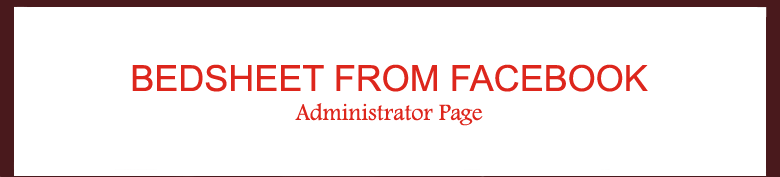
<style>
.page{position:relative;width:780px;height:177px;background:#ffffff}
.page>*{position:absolute;margin:0}
.t1{font:36px "ArialMT";color:#dd261c}
.t2{font:24px "FootlightMTLight";color:#dd261c}
</style>
<div class="page">
<p class="t1" style="left:132px;top:64px;width:516px;height:62px;text-align:center">BEDSHEET FROM FACEBOOK<br><span class="t2">Administrator Page</span></p>
</div>
